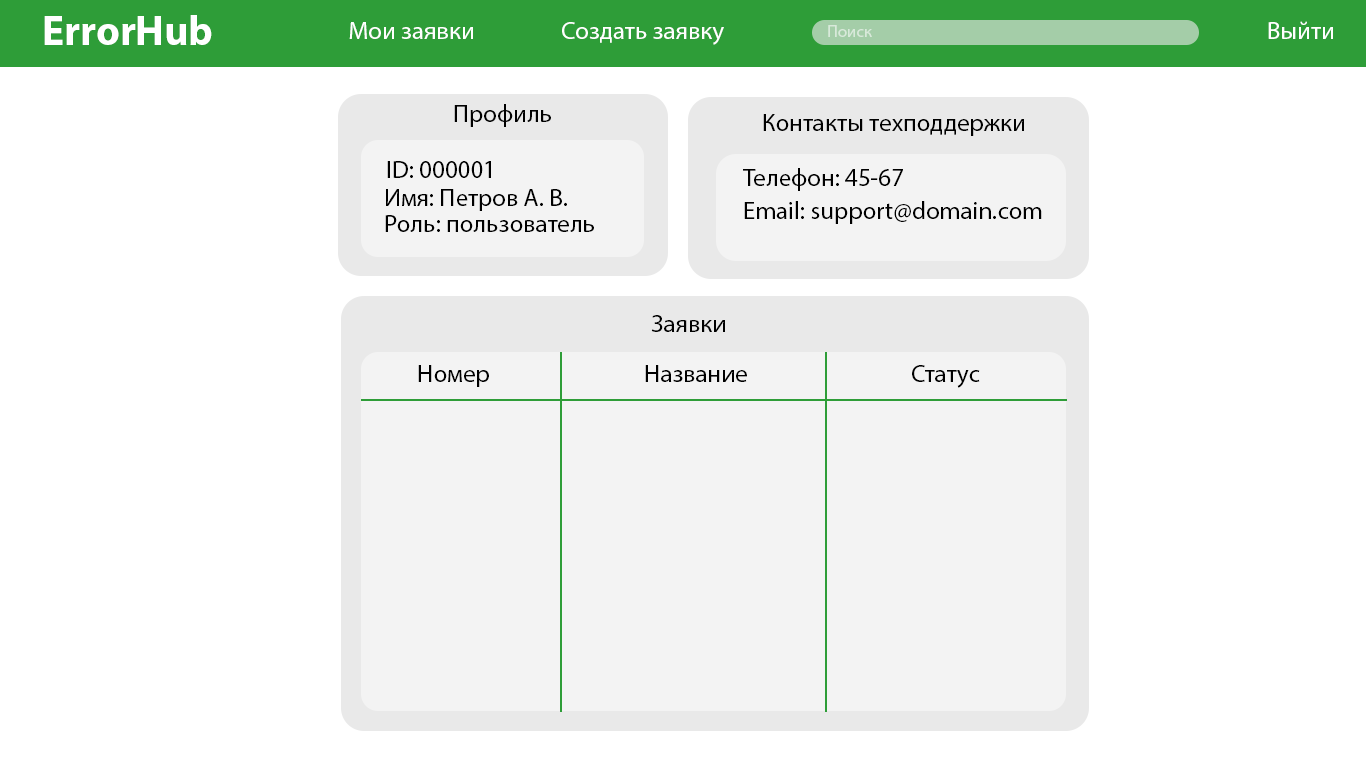
<style>
.page{position:relative;width:1366px;height:768px;background:#ffffff}
.page>*{position:absolute;margin:0}
.t1{font:41.7px "MyriadPro-Bold";color:#ffffff}
.t2{font:25px "MyriadPro-Regular";color:#ffffff}
.t3{font:16.7px "MyriadPro-Regular";color:#d8e9da}
.t4{font:25px "MyriadPro-Regular";color:#000000}
</style>
<div class="page">
<p class="t1" style="left:44px;top:15px;width:168px;height:30px">ErrorHub</p>
<p class="t2" style="left:349px;top:22px;width:124px;height:17px">Мои заявки</p>
<p class="t2" style="left:562px;top:22px;width:162px;height:23px">Создать заявку</p>
<p class="t3" style="left:828px;top:25px;width:44px;height:12px">Поиск</p>
<p class="t2" style="left:1268px;top:21px;width:65px;height:18px">Выйти</p>
<p class="t4" style="left:454px;top:104px;width:97px;height:23px">Профиль</p>
<p class="t4" style="left:763px;top:114px;width:261px;height:22px">Контакты техподдержки</p>
<p class="t4" style="left:387px;top:161px;width:104px;height:17px">ID: 000001</p>
<p class="t4" style="left:743px;top:168px;width:160px;height:23px">Телефон: 45-67</p>
<p class="t4" style="left:386px;top:189px;width:181px;height:22px">Имя: Петров А. В.</p>
<p class="t4" style="left:744px;top:201px;width:298px;height:23px">Email: support@domain.com</p>
<p class="t4" style="left:385px;top:215px;width:209px;height:17px">Роль: пользователь</p>
<p class="t4" style="left:651px;top:315px;width:74px;height:17px">Заявки</p>
<p class="t4" style="left:418px;top:365px;width:71px;height:22px">Номер</p>
<p class="t4" style="left:645px;top:365px;width:102px;height:17px">Название</p>
<p class="t4" style="left:912px;top:365px;width:68px;height:23px">Статус</p>
</div>
